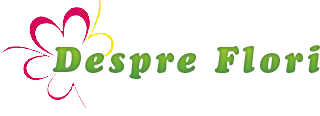
<style>
.page{position:relative;width:320px;height:116px;background:#ffffff}
.page>*{position:absolute;margin:0}
.t1{font:36px "CooperBlackStd-Italic";letter-spacing:0.1em;color:#65a333}
</style>
<div class="page">
<p class="t1" style="left:53px;top:45px;width:267px;height:34px">Despre Flori</p>
</div>
